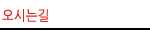
<style>
.page{position:relative;width:150px;height:30px;background:#ffffff}
.page>*{position:absolute;margin:0}
.t1{font:14px "NanumGothic";color:#dc241f;scale:0.9 1}
</style>
<div class="page">
<p class="t1" style="left:2px;top:9px;width:46px;height:13px">오시는길</p>
</div>
